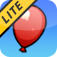
<style>
.page{position:relative;width:57px;height:57px}
.page>*{position:absolute;margin:0}
.t1{font:12px "MyriadPro-BoldIt";letter-spacing:0.075em;color:#343434}
</style>
<div class="page">
<p class="t1" style="left:1px;top:0px;width:22px;height:24px;rotate:-45deg">LITE</p>
</div>
